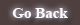
<style>
.page{position:relative;width:80px;height:25px;background:#4f4040}
.page>*{position:absolute;margin:0}
.t1{font:15px "TimesNewRomanPS-BoldMT";color:#fdfbfb}
</style>
<div class="page">
<p class="t1" style="left:12px;top:8px;width:56px;height:10px">Go Back</p>
</div>
